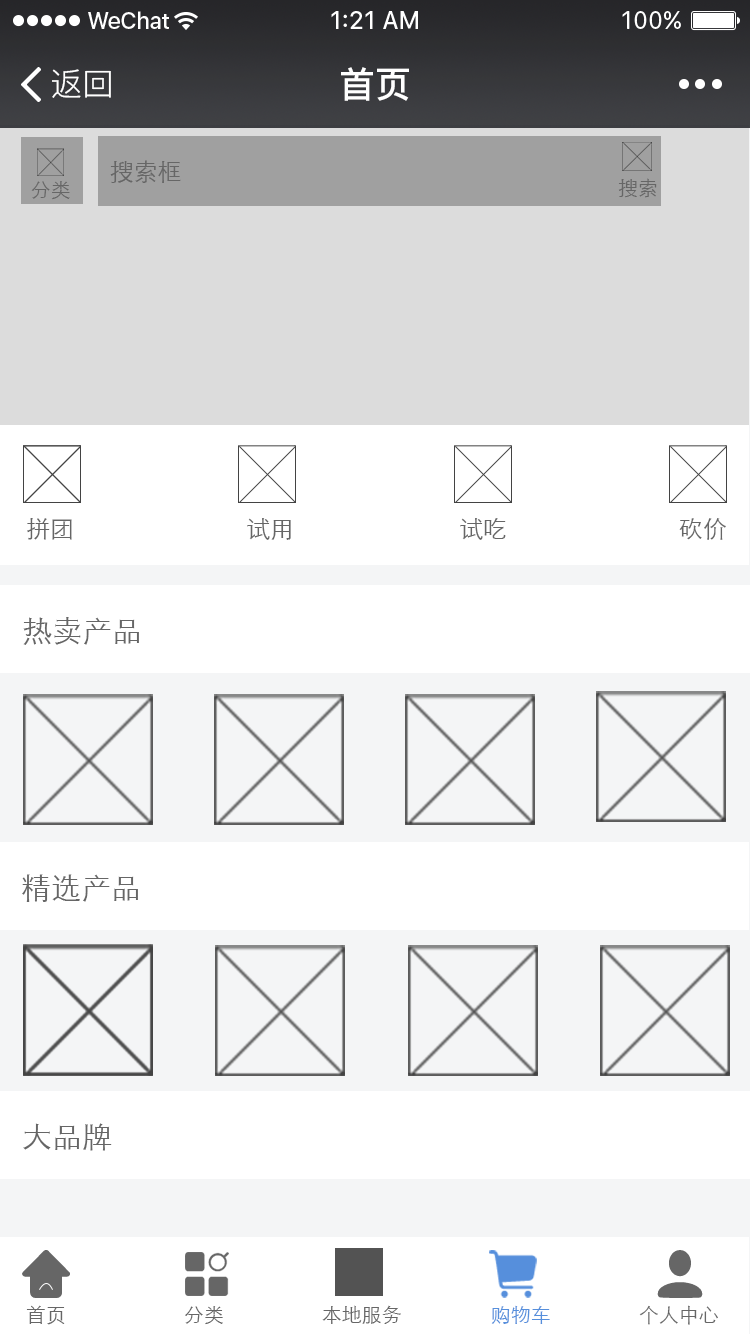
<style>
.page{position:relative;width:750px;height:1334px;background:#ffffff}
.page>*{position:absolute;margin:0}
.t1{font:32px "PingFang-SC-Regular";color:#ffffff}
.t2{font:36px "PingFang-SC-Bold";color:#ffffff}
.t3{font:24px "STXihei";color:#666666}
.t4{font:20px "STXihei";color:#666666}
.t5{font:30px "STXihei";color:#666666}
.t6{font:20px "STXihei";color:#568fdc}
</style>
<div class="page">
<p class="t1" style="left:52px;top:69px;width:59px;height:29px">返回</p>
<p class="t2" style="left:341px;top:67px;width:68px;height:34px">首页</p>
<p class="t3" style="left:110px;top:160px;width:71px;height:23px">搜索框</p>
<p class="t4" style="left:31px;top:181px;width:39px;height:19px">分类</p>
<p class="t4" style="left:618px;top:178px;width:39px;height:20px">搜索</p>
<p class="t3" style="left:27px;top:518px;width:45px;height:22px">拼团</p>
<p class="t3" style="left:247px;top:518px;width:44px;height:22px">试用</p>
<p class="t3" style="left:460px;top:518px;width:46px;height:22px">试吃</p>
<p class="t3" style="left:679px;top:518px;width:47px;height:22px">砍价</p>
<p class="t5" style="left:23px;top:617px;width:116px;height:28px">热卖产品</p>
<p class="t5" style="left:22px;top:874px;width:116px;height:28px">精选产品</p>
<p class="t5" style="left:23px;top:1123px;width:89px;height:28px">大品牌</p>
<p class="t4" style="left:26px;top:1305px;width:39px;height:20px">首页</p>
<p class="t4" style="left:185px;top:1306px;width:38px;height:19px">分类</p>
<p class="t4" style="left:322px;top:1305px;width:79px;height:19px">本地服务</p>
<p class="t6" style="left:491px;top:1305px;width:59px;height:19px">购物车</p>
<p class="t4" style="left:639px;top:1305px;width:79px;height:20px">个人中心</p>
</div>
